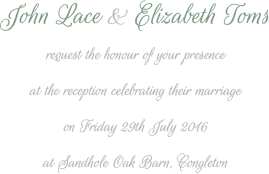
<style>
.page{position:relative;width:269px;height:174px;background:#ffffff}
.page>*{position:absolute;margin:0}
.t1{font:18px "RougeScript-Regular";color:#b9b9b9;font-style:italic}
.t2{font:30px "RougeScript-Regular";color:#7b9883;font-style:italic}
.t3{font:30px "RougeScript-Regular";color:#b9b9b9;font-style:italic}
</style>
<div class="page">
<p class="t1" style="left:0px;top:0px;width:269px;height:174px;text-align:center"><span class="t2">John Lace </span><span class="t3">&amp;</span><span class="t2"> Elizabeth Toms<br><br></span>request the honour of your presence<br><br>at the reception celebrating their marriage<br><br>on Friday 29th July 2016<br><br>at Sandhole Oak Barn, Congleton</p>
</div>
